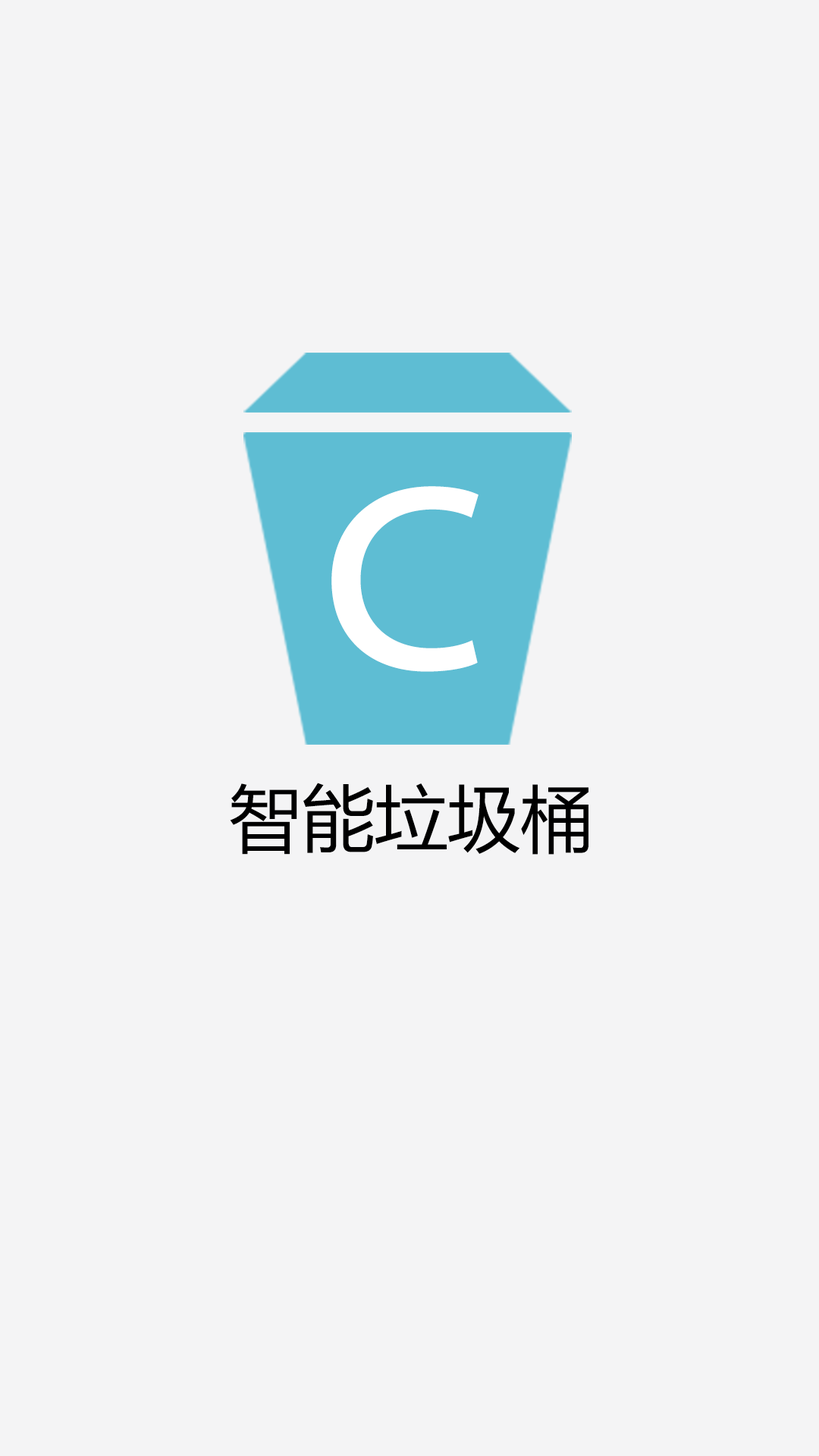
<style>
.page{position:relative;width:819px;height:1456px;background:#f4f4f5}
.page>*{position:absolute;margin:0}
.t1{font:56.1px "AdobeHeitiStd-Regular";color:#ffffff}
.t2{font:72.8px "MicrosoftYaHei";color:#000000}
</style>
<div class="page">
<p class="t1" style="left:331px;top:486px;width:148px;height:186px">C</p>
<p class="t2" style="left:230px;top:783px;width:358px;height:72px">智能垃圾桶</p>
</div>
